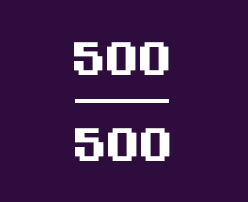
<style>
.page{position:relative;width:248px;height:202px;background:#2e0c3d}
.page>*{position:absolute;margin:0}
.t1{font:48px "PixelDigivolve";color:#ffffff;text-transform:uppercase}
</style>
<div class="page">
<p class="t1" style="left:74px;top:42px;width:95px;height:33px">500</p>
<p class="t1" style="left:75px;top:128px;width:95px;height:33px">500</p>
</div>
